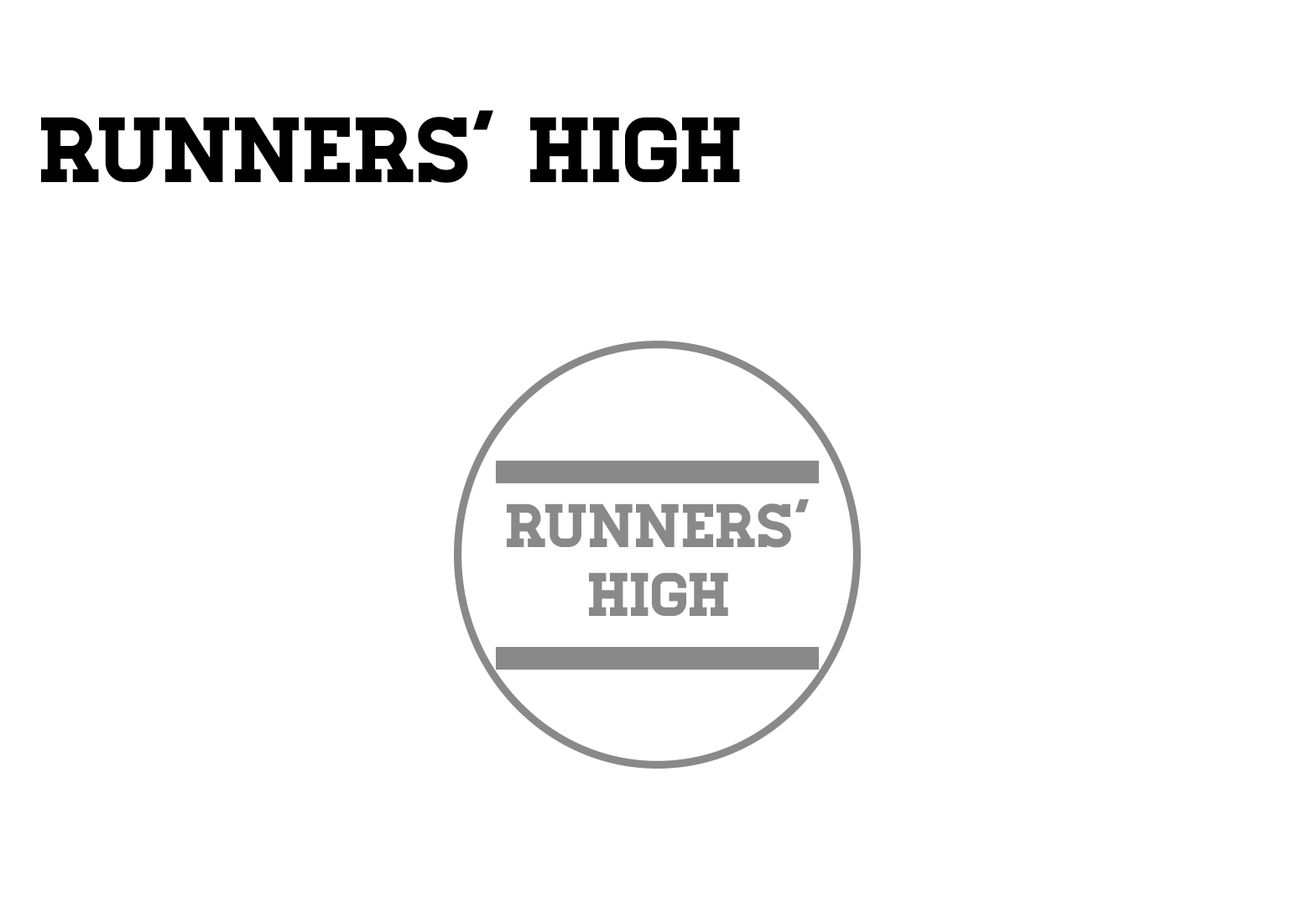
<style>
.page{position:relative;width:1292px;height:923px;background:#ffffff}
.page>*{position:absolute;margin:0}
.t1{font:92.3px "Homestead-Regular";color:#000000}
.t2{font:61.5px "Homestead-Regular";color:#898989}
</style>
<div class="page">
<p class="t1" style="left:41px;top:110px;width:699px;height:73px">runners’ high</p>
<p class="t2" style="left:507px;top:499px;width:302px;height:49px">runners’</p>
<p class="t2" style="left:589px;top:572px;width:139px;height:44px">High</p>
</div>
